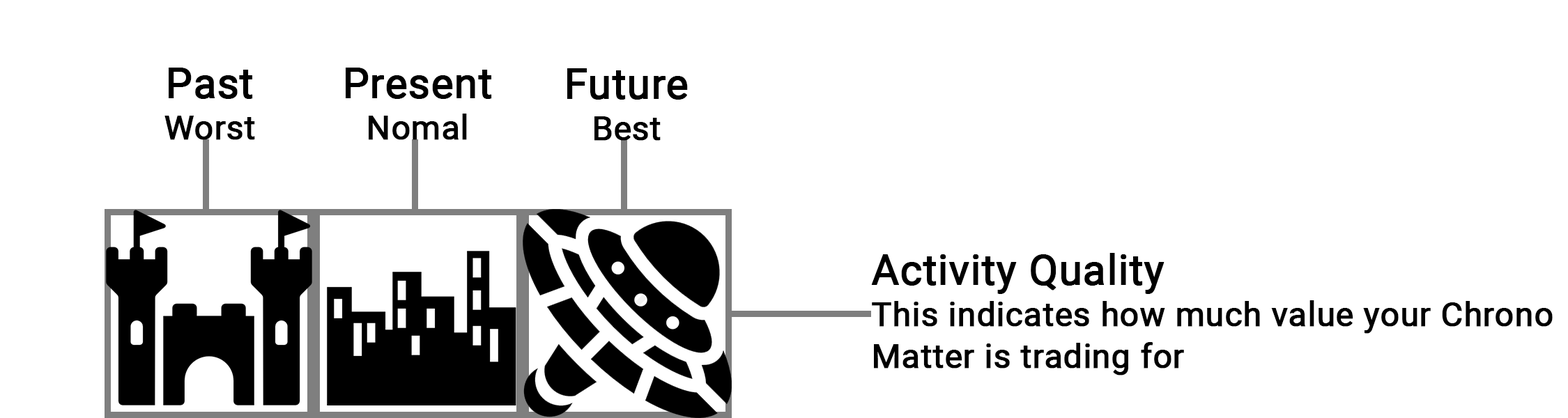
<style>
.page{position:relative;width:1568px;height:418px;background:#ffffff}
.page>*{position:absolute;margin:0}
.t1{font:33.5px/41.8px "Roboto-Regular";color:#000000;font-weight:bold}
.t2{font:41.8px/41.8px "Roboto-Regular";color:#000000;font-weight:bold}
</style>
<div class="page">
<p class="t1" style="left:164px;top:68px;width:91px;height:72px;text-align:center"><span class="t2">Past<br></span>Worst</p>
<p class="t2" style="left:346px;top:68px;width:146px;height:72px;text-align:center">Present<br><span class="t1">Nomal</span></p>
<p class="t2" style="left:567px;top:68px;width:121px;height:73px;text-align:center">Future<br><span class="t1">Best</span></p>
<p class="t1" style="left:871px;top:253px;width:682px;height:123px"><span class="t2">Activity Quality<br></span>This indicates how much value your Chrono <br>Matter is trading for</p>
</div>
